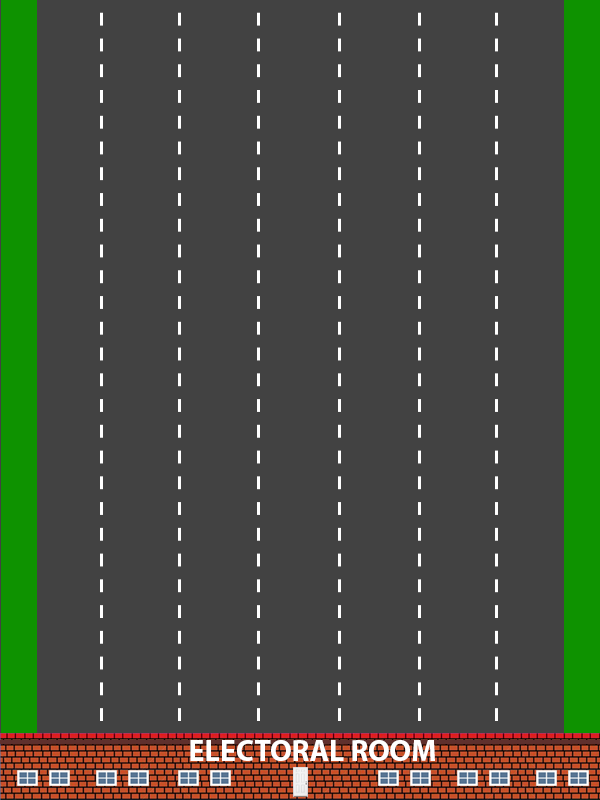
<style>
.page{position:relative;width:600px;height:800px;background:#424242}
.page>*{position:absolute;margin:0}
.t1{font:30px "MyriadPro-Bold";color:#ffffff}
</style>
<div class="page">
<p class="t1" style="left:190px;top:740px;width:245px;height:21px">ELECTORAL ROOM</p>
</div>
